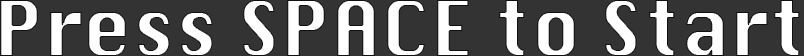
<style>
.page{position:relative;width:804px;height:56px;background:#333333}
.page>*{position:absolute;margin:0}
.t1{font:75px "Krungthep";color:#ffffff}
</style>
<div class="page">
<p class="t1" style="left:0px;top:0px;width:800px;height:56px">Press SPACE to Start</p>
</div>
